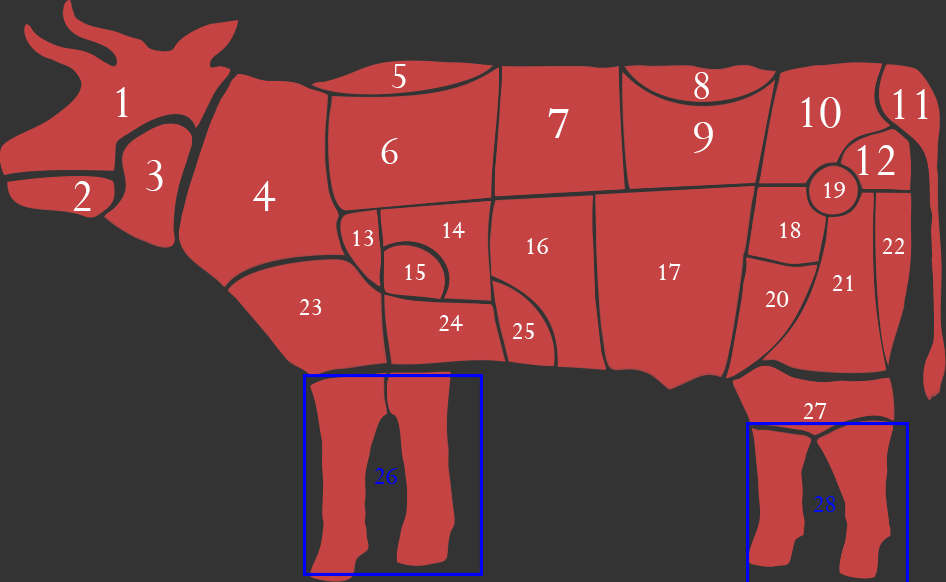
<style>
.page{position:relative;width:946px;height:582px;background:#333333}
.page>*{position:absolute;margin:0}
.t1{font:41px "Riven";color:#ffffff}
.t2{font:43.1px "Riven";color:#ffffff}
.t3{font:49.6px "Riven";color:#ffffff}
.t4{font:42.5px "Riven";color:#ffffff}
.t5{font:26.8px "Riven";color:#ffffff}
.t6{font:26.8px "Riven";color:#0000ff}
.t7{font:26.8px "Riven";color:#010dff}
</style>
<div class="page">
<p class="t1" style="left:392px;top:64px;width:14px;height:24px">5</p>
<p class="t2" style="left:694px;top:72px;width:15px;height:27px">8</p>
<p class="t3" style="left:116px;top:87px;width:12px;height:30px">1</p>
<p class="t3" style="left:893px;top:89px;width:35px;height:30px">11</p>
<p class="t3" style="left:801px;top:97px;width:40px;height:31px">10</p>
<p class="t3" style="left:548px;top:108px;width:21px;height:30px">7</p>
<p class="t3" style="left:694px;top:122px;width:19px;height:31px">9</p>
<p class="t4" style="left:381px;top:138px;width:17px;height:26px">6</p>
<p class="t3" style="left:857px;top:145px;width:38px;height:30px">12</p>
<p class="t3" style="left:146px;top:160px;width:17px;height:31px">3</p>
<p class="t3" style="left:73px;top:181px;width:18px;height:30px">2</p>
<p class="t3" style="left:253px;top:181px;width:23px;height:30px">4</p>
<p class="t5" style="left:824px;top:182px;width:21px;height:16px">19</p>
<p class="t5" style="left:443px;top:222px;width:22px;height:16px">14</p>
<p class="t5" style="left:780px;top:222px;width:21px;height:16px">18</p>
<p class="t5" style="left:353px;top:230px;width:21px;height:16px">13</p>
<p class="t5" style="left:527px;top:238px;width:21px;height:16px">16</p>
<p class="t5" style="left:882px;top:238px;width:22px;height:16px">22</p>
<p class="t5" style="left:405px;top:264px;width:20px;height:16px">15</p>
<p class="t5" style="left:659px;top:263px;width:22px;height:17px">17</p>
<p class="t5" style="left:832px;top:275px;width:21px;height:16px">21</p>
<p class="t5" style="left:765px;top:291px;width:24px;height:16px">20</p>
<p class="t5" style="left:299px;top:299px;width:23px;height:16px">23</p>
<p class="t5" style="left:439px;top:315px;width:24px;height:16px">24</p>
<p class="t5" style="left:512px;top:323px;width:22px;height:16px">25</p>
<p class="t5" style="left:803px;top:402px;width:24px;height:17px">27</p>
<p class="t6" style="left:374px;top:468px;width:23px;height:16px">26</p>
<p class="t7" style="left:813px;top:496px;width:23px;height:16px">28</p>
</div>
